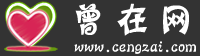
<style>
.page{position:relative;width:200px;height:56px;background:#333333}
.page>*{position:absolute;margin:0}
.t1{font:36px "HYn3gj";letter-spacing:0.2em;color:#ffffff;font-weight:bold}
.t2{font:16px "HYn3gj";color:#ffffff}
</style>
<div class="page">
<p class="t1" style="left:75px;top:3px;width:114px;height:33px">曾在网</p>
<p class="t2" style="left:74px;top:41px;width:122px;height:13px">www.cengzai.com</p>
</div>
